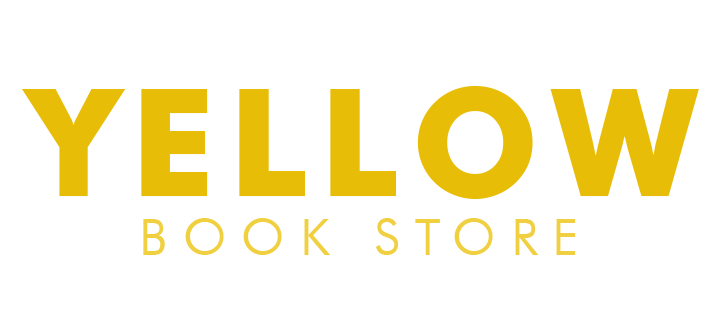
<style>
.page{position:relative;width:720px;height:324px;background:#ffffff}
.page>*{position:absolute;margin:0}
.t1{font:150px "Futura-Bold";letter-spacing:0.08em;color:#e7bd08}
.t2{font:50px "FuturaBT-Book";letter-spacing:0.3em;color:#f0cf41}
</style>
<div class="page">
<p class="t1" style="left:21px;top:86px;width:678px;height:113px">YELLOW</p>
<p class="t2" style="left:143px;top:218px;width:433px;height:37px">BOOK STORE</p>
</div>
